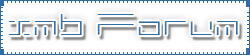
<style>
.page{position:relative;width:250px;height:55px;background:#ffffff}
.page>*{position:absolute;margin:0}
.t1{font:40px "MINIMALHARD2";color:#2d6ea8}
</style>
<div class="page">
<p class="t1" style="left:8px;top:14px;width:230px;height:21px">xmb Forum</p>
</div>
